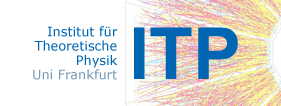
<style>
.page{position:relative;width:281px;height:106px;background:#ffffff}
.page>*{position:absolute;margin:0}
.t1{font:12.9px/14.4px "Verdana";color:#0066b3}
.t2{font:12.9px/14.4px "Verdana";color:#789ab3}
.t3{font:71.9px "Arial-BoldMT";color:#0066b3}
</style>
<div class="page">
<p class="t1" style="left:33px;top:26px;width:85px;height:54px;text-align:right">Institut für<br>Theoretische<br>Physik<br><span class="t2">Uni Frankfurt</span></p>
<p class="t3" style="left:134px;top:27px;width:104px;height:52px">ITP</p>
</div>
